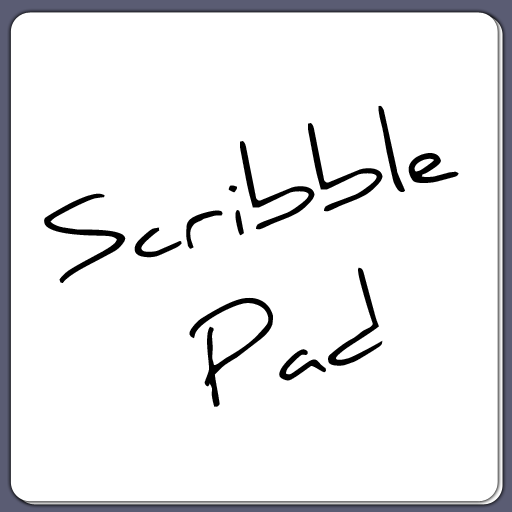
<style>
.page{position:relative;width:512px;height:512px;background:#ffffff}
.page>*{position:absolute;margin:0}
.t1{font:100px/17px "Daniel";color:#000000}
</style>
<div class="page">
<p class="t1" style="left:44px;top:105px;width:415px;height:302px;text-align:center;rotate:-15deg">Scribble<br><br><br><br><br><br><br><br><br>Pad</p>
</div>
